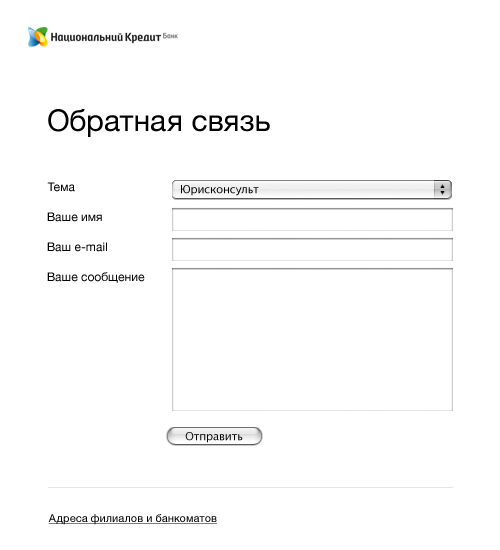
<style>
.page{position:relative;width:500px;height:550px;background:#ffffff}
.page>*{position:absolute;margin:0}
.t1{font:30px "HelveticaNeue";color:#000000}
.t2{font:12px "HelveticaNeue";color:#010101}
.t3{font:11px "LucidaGrande";color:#000000}
.t4{font:11px "HelveticaNeue";color:#000000;text-decoration:underline}
</style>
<div class="page">
<p class="t1" style="left:48px;top:109px;width:222px;height:28px">Обратная связь</p>
<p class="t2" style="left:47px;top:182px;width:28px;height:10px">Тема</p>
<p class="t3" style="left:181px;top:185px;width:78px;height:11px">Юрисконсульт</p>
<p class="t2" style="left:47px;top:212px;width:55px;height:10px">Ваше имя</p>
<p class="t2" style="left:47px;top:242px;width:60px;height:10px">Ваш e-mail</p>
<p class="t2" style="left:47px;top:272px;width:98px;height:11px">Ваше сообщение</p>
<p class="t3" style="left:185px;top:432px;width:58px;height:11px">Отправить</p>
<p class="t4" style="left:48px;top:514px;width:169px;height:11px">Адреса филиалов и банкоматов</p>
</div>
